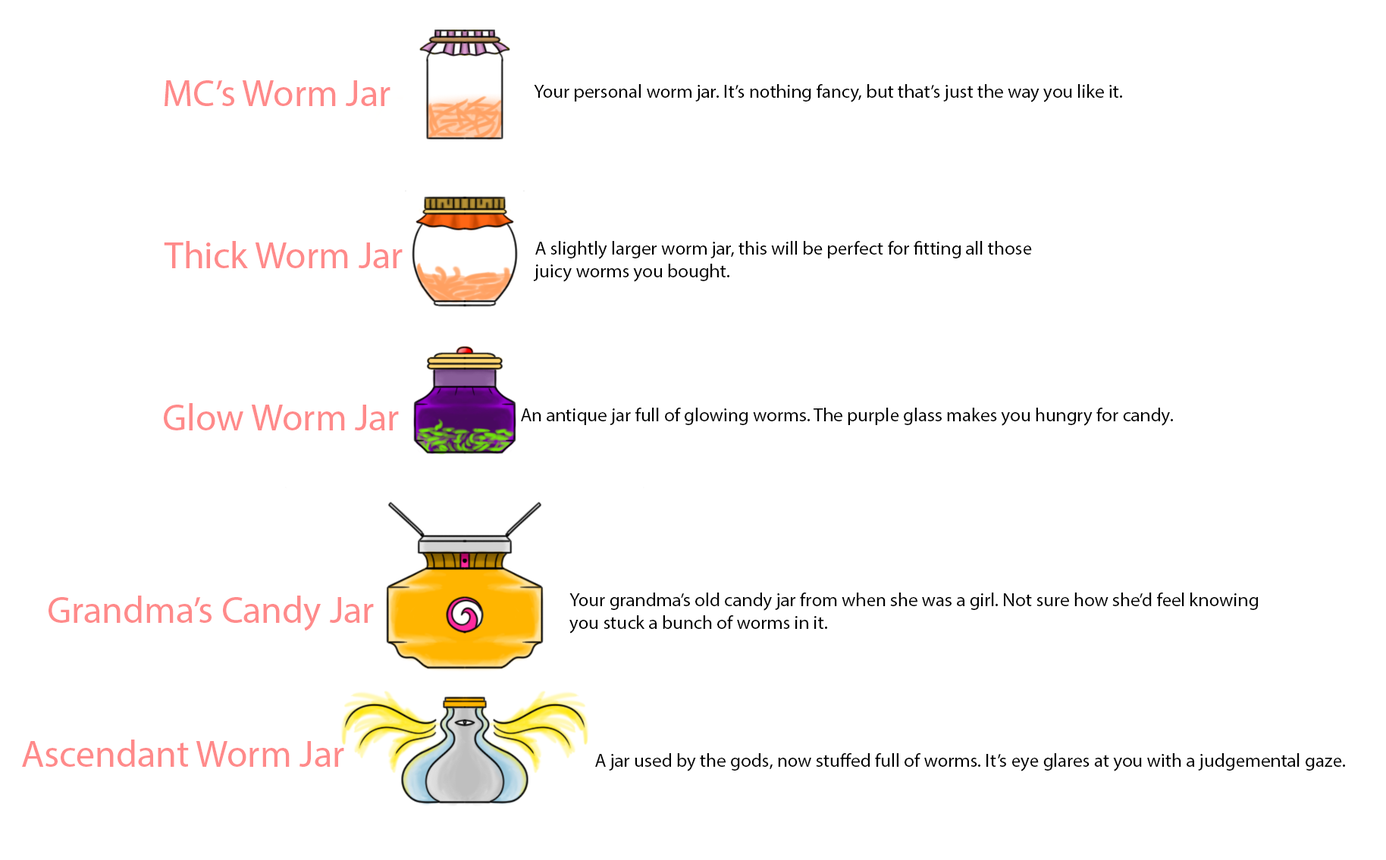
<style>
.page{position:relative;width:1386px;height:860px;background:#ffffff}
.page>*{position:absolute;margin:0}
.t1{font:37.9px "MyriadPro-Regular";color:#ff8a8a}
.t2{font:19px "MyriadPro-Regular";color:#000000}
</style>
<div class="page">
<p class="t1" style="left:165px;top:80px;width:225px;height:26px">MC’s Worm Jar</p>
<p class="t2" style="left:534px;top:84px;width:588px;height:18px">Your personal worm jar. It’s nothing fancy, but that’s just the way you like it.</p>
<p class="t1" style="left:164px;top:241px;width:239px;height:27px">Thick Worm Jar</p>
<p class="t2" style="left:533px;top:241px;width:499px;height:41px">A slightly larger worm jar, this will be perfect for fitting all those <br>juicy worms you bought.</p>
<p class="t1" style="left:164px;top:403px;width:235px;height:28px">Glow Worm Jar</p>
<p class="t2" style="left:521px;top:408px;width:652px;height:18px">An antique jar full of glowing worms. The purple glass makes you hungry for candy.</p>
<p class="t2" style="left:569px;top:593px;width:689px;height:41px">Your grandma’s old candy jar from when she was a girl. Not sure how she’d feel knowing <br>you stuck a bunch of worms in it.</p>
<p class="t1" style="left:49px;top:596px;width:325px;height:36px">Grandma’s Candy Jar</p>
<p class="t1" style="left:22px;top:740px;width:322px;height:27px">Ascendant Worm Jar</p>
<p class="t2" style="left:595px;top:754px;width:750px;height:18px">A jar used by the gods, now stuffed full of worms. It’s eye glares at you with a judgemental gaze.</p>
</div>
